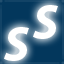
<style>
.page{position:relative;width:64px;height:64px;background:#03375c}
.page>*{position:absolute;margin:0}
.t1{font:50px "Myriad-BoldItalic";color:#ffffff}
</style>
<div class="page">
<p class="t1" style="left:33px;top:5px;width:25px;height:34px">S</p>
<p class="t1" style="left:4px;top:27px;width:25px;height:34px">S</p>
</div>
